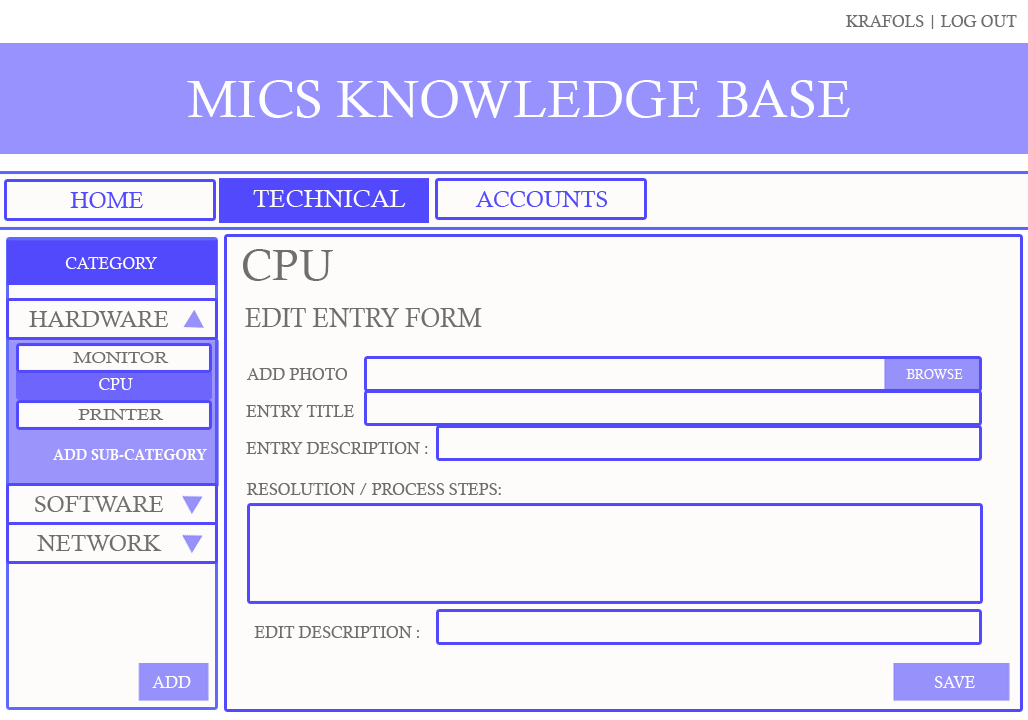
<style>
.page{position:relative;width:1028px;height:720px;background:#fdfcfa}
.page>*{position:absolute;margin:0}
.t1{font:16px "CalistoMT";color:#6e6e6f}
.t2{font:52.3px "CalistoMT";color:#fefeff}
.t3{font:22.8px "CalistoMT";color:#5249fc}
.t4{font:24.8px "CalistoMT";color:#fdfcf9}
.t5{font:16px "CalistoMT";color:#fdfcf9}
.t6{font:43.4px "CalistoMT";color:#6e6e6f}
.t7{font:22.8px "CalistoMT";color:#6e6e6f}
.t8{font:27.8px "CalistoMT";color:#6e6e6f;scale:0.88 1}
.t9{font:15.2px "CalistoMT";color:#6e6e6f;scale:1.22 1}
.t10{font:13.1px "CalistoMT";color:#fdfcf9}
.t11{font:14.8px "CalisMTBol";color:#fdfcf9;scale:0.95 1}
</style>
<div class="page">
<p class="t1" style="left:846px;top:15px;width:171px;height:14px">KRAFOLS | LOG OUT</p>
<p class="t2" style="left:187px;top:80px;width:663px;height:38px">MICS KNOWLEDGE BASE</p>
<p class="t3" style="left:70px;top:192px;width:73px;height:16px">HOME</p>
<p class="t4" style="left:253px;top:190px;width:153px;height:18px">TECHNICAL</p>
<p class="t3" style="left:475px;top:191px;width:133px;height:17px">ACCOUNTS</p>
<p class="t5" style="left:65px;top:257px;width:92px;height:12px">CATEGORY</p>
<p class="t6" style="left:243px;top:249px;width:90px;height:32px">CPU</p>
<p class="t7" style="left:29px;top:311px;width:140px;height:16px">HARDWARE</p>
<p class="t8" style="left:245px;top:308px;width:237px;height:20px">EDIT ENTRY FORM</p>
<p class="t9" style="left:73px;top:352px;width:96px;height:11px">MONITOR</p>
<p class="t1" style="left:247px;top:368px;width:100px;height:12px">ADD PHOTO</p>
<p class="t10" style="left:906px;top:369px;width:57px;height:10px">BROWSE</p>
<p class="t5" style="left:99px;top:378px;width:34px;height:12px">CPU</p>
<p class="t9" style="left:78px;top:409px;width:86px;height:11px">PRINTER</p>
<p class="t1" style="left:246px;top:405px;width:108px;height:12px">ENTRY TITLE</p>
<p class="t11" style="left:53px;top:449px;width:154px;height:11px">ADD SUB-CATEGORY</p>
<p class="t1" style="left:246px;top:442px;width:182px;height:12px">ENTRY DESCRIPTION :</p>
<p class="t1" style="left:246px;top:483px;width:255px;height:12px">RESOLUTION / PROCESS STEPS:</p>
<p class="t7" style="left:35px;top:496px;width:129px;height:16px">SOFTWARE</p>
<p class="t7" style="left:37px;top:535px;width:125px;height:17px">NETWORK</p>
<p class="t1" style="left:254px;top:626px;width:165px;height:12px">EDIT DESCRIPTION :</p>
<p class="t5" style="left:152px;top:676px;width:39px;height:12px">ADD</p>
<p class="t5" style="left:935px;top:676px;width:40px;height:12px">SAVE</p>
</div>
